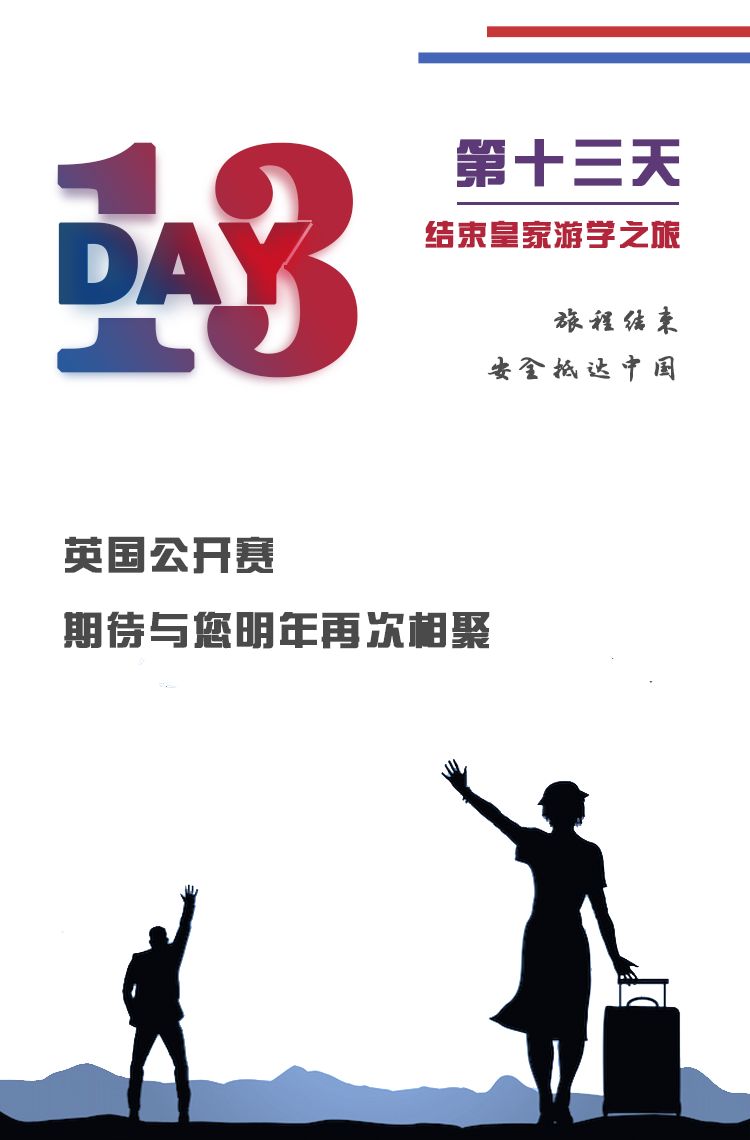
<style>
.page{position:relative;width:750px;height:1140px;background:#ffffff}
.page>*{position:absolute;margin:0}
.t1{font:320px "News706BT-BoldC";letter-spacing:-0.04em;font-weight:bold}
.t2{font:52px "FZZYJW--GB1-0";letter-spacing:0.1em;color:#5d3a77;font-weight:bold}
.t3{font:110px "FZCCHJW--GB1-0";letter-spacing:-0.05em;font-weight:bold}
.t4{font:30px "FZZYJW--GB1-0";letter-spacing:0.05em;color:#b3253a;font-weight:bold}
.t5{font:30px "·½ÕýÂÀ½¨µÂ×ÖÌå";letter-spacing:0.075em;color:#4d4d4d;font-weight:bold}
.t6{font:40px/37.5px "FZZYJW--GB1-0";letter-spacing:0.05em;color:#4a4a4a;font-weight:bold}
</style>
<div class="page">
<p class="t1" style="left:57px;top:142px;width:301px;height:236px">13</p>
<p class="t2" style="left:457px;top:139px;width:223px;height:48px">第十三天</p>
<p class="t3" style="left:58px;top:222px;width:248px;height:83px">DAY</p>
<p class="t4" style="left:425px;top:220px;width:255px;height:29px">结束皇家游学之旅</p>
<p class="t5" style="left:554px;top:306px;width:124px;height:29px">旅程结束</p>
<p class="t5" style="left:487px;top:355px;width:188px;height:27px">安全抵达中国</p>
<p class="t6" style="left:64px;top:536px;width:426px;height:113px">英国公开赛<br><br>期待与您明年再次相聚</p>
</div>
